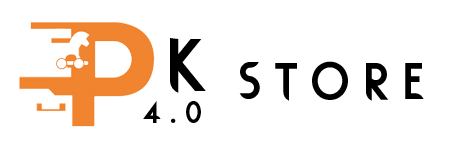
<style>
.page{position:relative;width:461px;height:150px;background:#ffffff}
.page>*{position:absolute;margin:0}
.t1{font:88px "Rodondo";letter-spacing:0.24em;color:#000000}
.t2{font:60px "Rodondo";letter-spacing:0.24em;color:#000000}
.t3{font:36px "Rodondo";letter-spacing:0.24em;color:#000000}
</style>
<div class="page">
<p class="t1" style="left:170px;top:38px;width:36px;height:55px">K</p>
<p class="t2" style="left:239px;top:61px;width:185px;height:40px">STORE</p>
<p class="t3" style="left:143px;top:101px;width:58px;height:22px">4.0</p>
</div>
